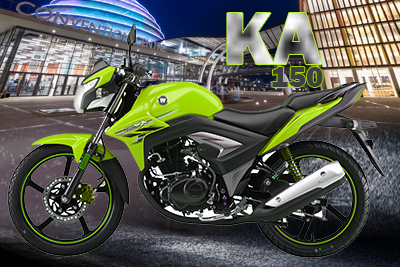
<style>
.page{position:relative;width:400px;height:267px}
.page>*{position:absolute;margin:0}
.t1{font:76.3px "FranklinGothic-Heavy"}
.t2{font:30px "FranklinGothic-Heavy";color:#3f3f3f}
</style>
<div class="page">
<p class="t1" style="left:227px;top:13px;width:95px;height:51px">KA</p>
<p class="t2" style="left:272px;top:67px;width:51px;height:20px">150</p>
</div>
